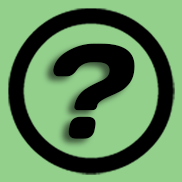
<style>
.page{position:relative;width:182px;height:182px;background:#93d08c}
.page>*{position:absolute;margin:0}
.t1{font:134.4px "DaysOne-Regular";color:#000000;font-style:italic}
</style>
<div class="page">
<p class="t1" style="left:53px;top:43px;width:82px;height:96px">?</p>
</div>
